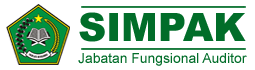
<style>
.page{position:relative;width:255px;height:70px;background:#ffffff}
.page>*{position:absolute;margin:0}
.t1{font:38.9px "Arial-Black";color:#016d29}
.t2{font:13.9px "ArialMT";color:#016d29}
</style>
<div class="page">
<p class="t1" style="left:79px;top:12px;width:167px;height:30px">SIMPAK</p>
<p class="t2" style="left:78px;top:53px;width:169px;height:13px">Jabatan Fungsional Auditor</p>
</div>
